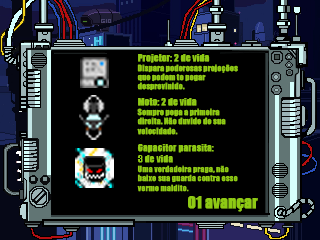
<style>
.page{position:relative;width:320px;height:240px;background:#000000}
.page>*{position:absolute;margin:0}
.t1{font:7.8px "Impact";color:#8eca14;font-weight:bold}
.t2{font:9.1px "Impact";color:#8eca14;font-weight:bold}
.t3{font:15px "Impact";color:#8eca14;font-weight:bold}
</style>
<div class="page">
<p class="t1" style="left:137px;top:54px;width:101px;height:37px"><span class="t2">Projetor: 2 de vida<br></span>Dispara poderosas projeções que podem te pegar desprevinido.</p>
<p class="t1" style="left:137px;top:98px;width:89px;height:37px"><span class="t2">Moto: 2 de vida<br></span>Sempre pega a primeira direita. Não duvide de sua velocidade.</p>
<p class="t3" style="left:188px;top:196px;width:70px;height:16px">01 avançar</p>
</div>
